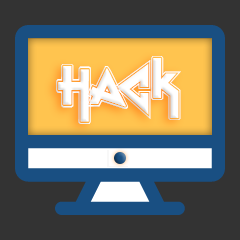
<style>
.page{position:relative;width:240px;height:240px;background:#333333}
.page>*{position:absolute;margin:0}
.t1{font:60px "vtksRudeMetalshadow";color:#ffffff}
</style>
<div class="page">
<p class="t1" style="left:56px;top:56px;width:125px;height:68px">HACK</p>
</div>
